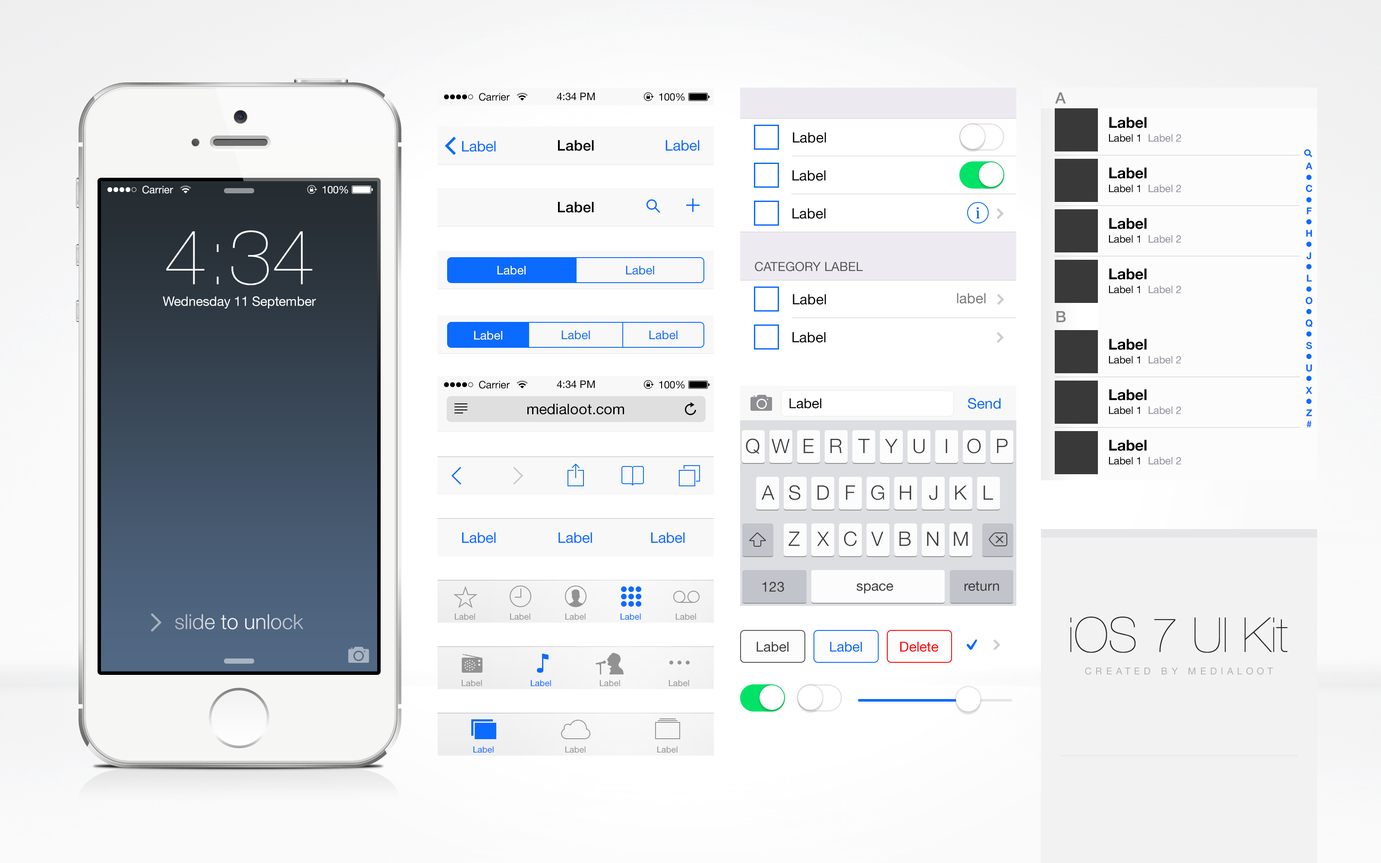
<style>
.page{position:relative;width:1381px;height:863px}
.page>*{position:absolute;margin:0}
.t1{font:10.4px "HelveticaNeue";color:#000000}
.t2{font:15.5px "HelveticaNeue-Medium";color:#858585}
.t3{font:10.4px/13.8px "HelveticaNeue";color:#000000}
.t4{font:15.1px "HelveticaNeue-Bold";color:#000000}
.t5{font:10.4px/13.8px "HelveticaNeue";color:#8f919d}
.t6{font:14.2px "HelveticaNeue";color:#000000}
.t7{font:14.7px "HelveticaNeue";color:#0a69ff}
.t8{font:14.7px "HelveticaNeue-Medium";color:#000000}
.t9{font:9.5px/11.2px "HelveticaNeue-Bold";color:#0b6aff}
.t10{font:10.4px "HelveticaNeue";color:#ffffff}
.t11{font:12.9px/21.6px "HelveticaNeue";color:#ffffff}
.t12{font:77.7px "HelveticaNeue-UltraLight";color:#ffffff}
.t13{font:12.1px "HelveticaNeue";color:#ffffff}
.t14{font:12.1px "HelveticaNeue";color:#0b6aff}
.t15{font:12.5px "HelveticaNeue";color:#555555;text-transform:uppercase}
.t16{font:14.2px "HelveticaNeue";color:#777777}
.t17{font:13.8px "HelveticaNeue";color:#000000}
.t18{font:14.7px "HelveticaNeue";color:#000000}
.t19{font:19.9px "HelveticaNeue-Light";color:#3c3c3c}
.t20{font:13.8px "HelveticaNeue";letter-spacing:0.005em;color:#3c3c3c}
.t21{font:13.8px "HelveticaNeue";color:#3c3c3c}
.t22{font:20.7px "HelveticaNeue-Light"}
.t23{font:8.6px "HelveticaNeue";color:#929292}
.t24{font:8.6px "HelveticaNeue";color:#0b6aff}
.t25{font:48.3px "HelveticaNeue-UltraLight";color:#242424}
.t26{font:13.8px "HelveticaNeue";color:#0b6aff}
.t27{font:13.8px "HelveticaNeue";color:#ff0000}
.t28{font:9.5px "HelveticaNeue";letter-spacing:0.4em;color:#aeb0b8;text-transform:uppercase}
</style>
<div class="page">
<p class="t1" style="left:479px;top:93px;width:31px;height:8px">Carrier</p>
<p class="t1" style="left:557px;top:92px;width:38px;height:9px">4:34 PM</p>
<p class="t1" style="left:659px;top:93px;width:26px;height:8px">100%</p>
<p class="t2" style="left:1055px;top:92px;width:11px;height:12px">A</p>
<p class="t3" style="left:1109px;top:117px;width:72px;height:25px"><span class="t4">Label<br></span>Label 1  <span class="t5">Label 2</span></p>
<p class="t6" style="left:793px;top:132px;width:33px;height:11px">Label</p>
<p class="t7" style="left:462px;top:141px;width:34px;height:11px">Label</p>
<p class="t8" style="left:558px;top:140px;width:36px;height:11px">Label</p>
<p class="t7" style="left:666px;top:140px;width:34px;height:11px">Label</p>
<p class="t6" style="left:793px;top:170px;width:33px;height:11px">Label</p>
<p class="t3" style="left:1109px;top:167px;width:72px;height:26px"><span class="t4">Label<br></span>Label 1  <span class="t5">Label 2</span></p>
<p class="t9" style="left:1306px;top:162px;width:7px;height:266px;text-align:center">A<br><br>C<br><br>F<br><br>H<br><br>J<br><br>L<br><br>O<br><br>Q<br><br>S<br><br>U<br><br>X<br><br>Z<br>#</p>
<p class="t10" style="left:142px;top:186px;width:31px;height:8px">Carrier</p>
<p class="t10" style="left:322px;top:186px;width:26px;height:8px">100%</p>
<p class="t8" style="left:558px;top:202px;width:36px;height:11px">Label</p>
<p class="t6" style="left:793px;top:208px;width:33px;height:11px">Label</p>
<p class="t3" style="left:1109px;top:218px;width:72px;height:25px"><span class="t4">Label<br></span>Label 1  <span class="t5">Label 2</span></p>
<p class="t11" style="left:163px;top:230px;width:153px;height:79px;text-align:center"><span class="t12">4:34<br></span>Wednesday 11 September</p>
<p class="t13" style="left:497px;top:266px;width:29px;height:9px">Label</p>
<p class="t14" style="left:626px;top:266px;width:28px;height:9px">Label</p>
<p class="t15" style="left:755px;top:262px;width:108px;height:10px">Category Label</p>
<p class="t3" style="left:1109px;top:268px;width:72px;height:26px"><span class="t4">Label<br></span>Label 1  <span class="t5">Label 2</span></p>
<p class="t6" style="left:793px;top:294px;width:33px;height:11px">Label</p>
<p class="t16" style="left:957px;top:293px;width:29px;height:11px">label</p>
<p class="t2" style="left:1057px;top:311px;width:9px;height:11px">B</p>
<p class="t13" style="left:474px;top:331px;width:28px;height:9px">Label</p>
<p class="t14" style="left:562px;top:331px;width:28px;height:9px">Label</p>
<p class="t14" style="left:649px;top:331px;width:29px;height:9px">Label</p>
<p class="t6" style="left:793px;top:332px;width:33px;height:11px">Label</p>
<p class="t3" style="left:1109px;top:339px;width:72px;height:25px"><span class="t4">Label<br></span>Label 1  <span class="t5">Label 2</span></p>
<p class="t1" style="left:479px;top:381px;width:31px;height:8px">Carrier</p>
<p class="t1" style="left:557px;top:380px;width:38px;height:8px">4:34 PM</p>
<p class="t1" style="left:659px;top:381px;width:26px;height:8px">100%</p>
<p class="t3" style="left:1109px;top:389px;width:72px;height:25px"><span class="t4">Label<br></span>Label 1  <span class="t5">Label 2</span></p>
<p class="t17" style="left:789px;top:398px;width:32px;height:11px">Label</p>
<p class="t7" style="left:968px;top:398px;width:33px;height:11px">Send</p>
<p class="t18" style="left:527px;top:404px;width:97px;height:11px">medialoot.com</p>
<p class="t19" style="left:746px;top:439px;width:14px;height:15px">Q</p>
<p class="t19" style="left:772px;top:439px;width:18px;height:14px">W</p>
<p class="t19" style="left:804px;top:439px;width:10px;height:14px">E</p>
<p class="t19" style="left:830px;top:439px;width:12px;height:14px">R</p>
<p class="t19" style="left:858px;top:439px;width:12px;height:14px">T</p>
<p class="t19" style="left:885px;top:439px;width:13px;height:14px">Y</p>
<p class="t19" style="left:914px;top:439px;width:11px;height:15px">U</p>
<p class="t19" style="left:946px;top:439px;width:1px;height:14px">I</p>
<p class="t19" style="left:967px;top:439px;width:14px;height:15px">O</p>
<p class="t19" style="left:997px;top:439px;width:11px;height:14px">P</p>
<p class="t3" style="left:1109px;top:440px;width:72px;height:25px"><span class="t4">Label<br></span>Label 1  <span class="t5">Label 2</span></p>
<p class="t19" style="left:761px;top:486px;width:14px;height:14px">A</p>
<p class="t19" style="left:789px;top:485px;width:12px;height:15px">S</p>
<p class="t19" style="left:818px;top:486px;width:11px;height:14px">D</p>
<p class="t19" style="left:846px;top:486px;width:10px;height:14px">F</p>
<p class="t19" style="left:871px;top:485px;width:13px;height:15px">G</p>
<p class="t19" style="left:900px;top:486px;width:12px;height:14px">H</p>
<p class="t19" style="left:929px;top:486px;width:9px;height:14px">J</p>
<p class="t19" style="left:955px;top:486px;width:12px;height:14px">K</p>
<p class="t19" style="left:984px;top:486px;width:9px;height:14px">L</p>
<p class="t7" style="left:462px;top:532px;width:34px;height:11px">Label</p>
<p class="t7" style="left:559px;top:532px;width:33px;height:11px">Label</p>
<p class="t7" style="left:651px;top:532px;width:34px;height:11px">Label</p>
<p class="t19" style="left:789px;top:532px;width:11px;height:14px">Z</p>
<p class="t19" style="left:817px;top:532px;width:12px;height:14px">X</p>
<p class="t19" style="left:844px;top:531px;width:13px;height:15px">C</p>
<p class="t19" style="left:871px;top:532px;width:13px;height:14px">V</p>
<p class="t19" style="left:900px;top:532px;width:11px;height:14px">B</p>
<p class="t19" style="left:927px;top:532px;width:12px;height:14px">N</p>
<p class="t19" style="left:954px;top:532px;width:14px;height:14px">M</p>
<p class="t20" style="left:762px;top:582px;width:22px;height:10px">123</p>
<p class="t21" style="left:965px;top:581px;width:34px;height:10px">return</p>
<p class="t21" style="left:857px;top:584px;width:37px;height:10px">space</p>
<p class="t22" style="left:175px;top:614px;width:128px;height:16px">slide to unlock</p>
<p class="t23" style="left:455px;top:613px;width:20px;height:7px">Label</p>
<p class="t23" style="left:510px;top:613px;width:20px;height:7px">Label</p>
<p class="t23" style="left:565px;top:613px;width:21px;height:7px">Label</p>
<p class="t24" style="left:621px;top:613px;width:20px;height:7px">Label</p>
<p class="t23" style="left:676px;top:613px;width:20px;height:7px">Label</p>
<p class="t25" style="left:1070px;top:617px;width:218px;height:36px">iOS 7 UI Kit</p>
<p class="t21" style="left:757px;top:642px;width:32px;height:10px">Label</p>
<p class="t26" style="left:830px;top:642px;width:32px;height:10px">Label</p>
<p class="t27" style="left:900px;top:642px;width:38px;height:10px">Delete</p>
<p class="t28" style="left:1085px;top:668px;width:188px;height:7px">Created by Medialoot</p>
<p class="t23" style="left:462px;top:680px;width:20px;height:7px">Label</p>
<p class="t24" style="left:531px;top:680px;width:20px;height:7px">Label</p>
<p class="t23" style="left:600px;top:680px;width:20px;height:7px">Label</p>
<p class="t23" style="left:669px;top:680px;width:20px;height:7px">Label</p>
<p class="t24" style="left:474px;top:746px;width:20px;height:7px">Label</p>
<p class="t23" style="left:565px;top:746px;width:21px;height:7px">Label</p>
<p class="t23" style="left:657px;top:746px;width:21px;height:7px">Label</p>
</div>
